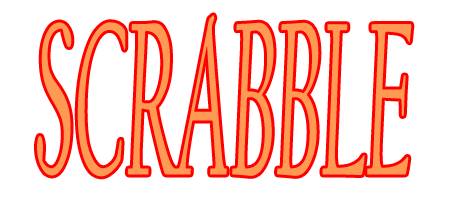
<style>
.page{position:relative;width:450px;height:200px;background:#ffffff}
.page>*{position:absolute;margin:0}
.t1{font:226.8px "CalifornianFB-Italic";color:#ff9a55;scale:0.39 1}
</style>
<div class="page">
<p class="t1" style="left:37px;top:15px;width:375px;height:162px">SCRABBLE</p>
</div>
